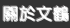
<style>
.page{position:relative;width:70px;height:28px;background:#333333}
.page>*{position:absolute;margin:0}
.t1{font:16px "YenRound-Heavy";letter-spacing:0.05em}
</style>
<div class="page">
<p class="t1" style="left:2px;top:5px;width:66px;height:16px">關於文鶴</p>
</div>
